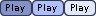
<style>
.page{position:relative;width:96px;height:16px;background:#e2e7f9}
.page>*{position:absolute;margin:0}
.t1{font:10px "Corbel";color:#000000}
</style>
<div class="page">
<p class="t1" style="left:6px;top:4px;width:19px;height:9px">Pl ay</p>
<p class="t1" style="left:38px;top:4px;width:19px;height:9px">Pl ay</p>
<p class="t1" style="left:71px;top:4px;width:6px;height:7px">Pl</p>
<p class="t1" style="left:79px;top:6px;width:10px;height:7px">ay</p>
</div>
